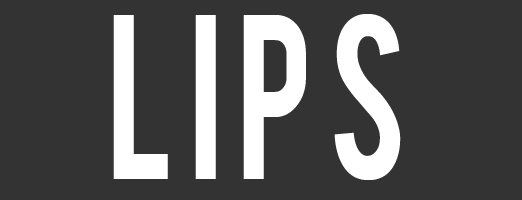
<style>
.page{position:relative;width:522px;height:200px;background:#333333}
.page>*{position:absolute;margin:0}
.t1{font:184.4px "Bebas";letter-spacing:0.1em;color:#ffffff;scale:0.8 1}
</style>
<div class="page">
<p class="t1" style="left:113px;top:14px;width:288px;height:166px">lips</p>
</div>
